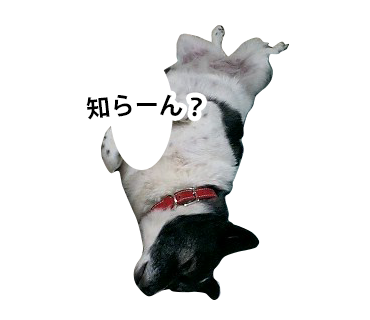
<style>
.page{position:relative;width:370px;height:320px;background:#ffffff}
.page>*{position:absolute;margin:0}
.t1{font:24px "KozGoPr6N-Bold";color:#000000}
</style>
<div class="page">
<p class="t1" style="left:86px;top:94px;width:116px;height:26px">知らーん？</p>
</div>
